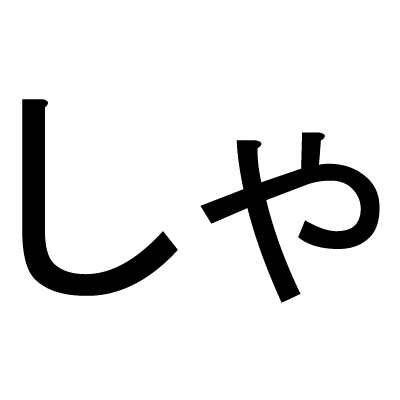
<style>
.page{position:relative;width:400px;height:400px;background:#ffffff}
.page>*{position:absolute;margin:0}
.t1{font:250px "MS-PGothic";color:#000000}
</style>
<div class="page">
<p class="t1" style="left:22px;top:99px;width:358px;height:204px">しゃ</p>
</div>
